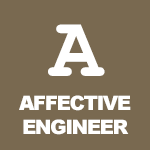
<style>
.page{position:relative;width:150px;height:150px;background:#796950}
.page>*{position:absolute;margin:0}
.t1{font:87px "CourierNewPS-BoldMT";letter-spacing:-0.075em;color:#ffffff}
.t2{font:20px "Arial-Black";letter-spacing:-0.075em;color:#ffffff}
</style>
<div class="page">
<p class="t1" style="left:48px;top:24px;width:57px;height:52px">A</p>
<p class="t2" style="left:19px;top:95px;width:112px;height:40px;text-align:center">AFFECTIVE<br>ENGINEER</p>
</div>
